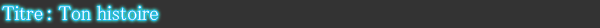
<style>
.page{position:relative;width:600px;height:28px;background:#333333}
.page>*{position:absolute;margin:0}
.t1{font:20px "MS-PMincho";color:#ffffff}
</style>
<div class="page">
<p class="t1" style="left:2px;top:5px;width:156px;height:16px">Titre : Ton histoire</p>
</div>
